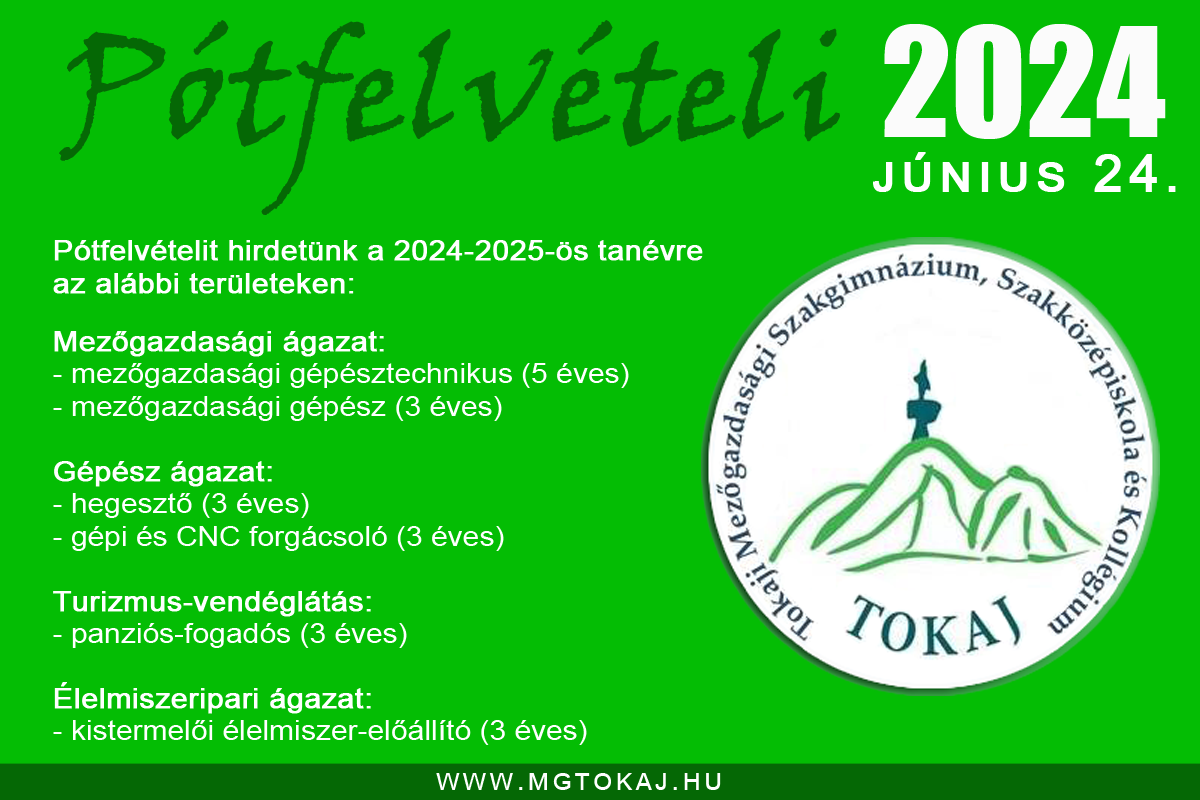
<style>
.page{position:relative;width:1200px;height:800px;background:#04bd04}
.page>*{position:absolute;margin:0}
.t1{font:141.9px "VinerHandITC";color:#056805}
.t2{font:139.5px "Impact";color:#fbfbfb}
.t3{font:52.4px "ArialMT";letter-spacing:0.1em;color:#ffffff;font-variant:small-caps;font-weight:bold}
.t4{font:27px "ArialMT";color:#ffffff;font-weight:bold;scale:1.11 1}
.t5{font:27px "ArialMT";color:#ffffff;scale:1.11 1}
.t6{font:30px "ArialMT";letter-spacing:0.1em;color:#ffffff;font-variant:small-caps}
</style>
<div class="page">
<p class="t1" style="left:59px;top:20px;width:781px;height:195px">Pótfelvételi</p>
<p class="t2" style="left:884px;top:24px;width:282px;height:115px">2024</p>
<p class="t3" style="left:873px;top:152px;width:303px;height:40px">június 24.</p>
<p class="t4" style="left:53px;top:240px;width:650px;height:505px">Pótfelvételit hirdetünk a 2024-2025-ös tanévre <br>az alábbi területeken:<br><br>Mezőgazdasági ágazat:<br><span class="t5">- mezőgazdasági gépésztechnikus (5 éves)<br>- mezőgazdasági gépész (3 éves)<br><br></span>Gépész ágazat:<br><span class="t5">- hegesztő (3 éves)<br>- gépi és CNC forgácsoló (3 éves)<br><br></span>Turizmus-vendéglátás:<br><span class="t5">- panziós-fogadós (3 éves)<br><br></span>Élelmiszeripari ágazat:<br><span class="t5">- kistermelői élelmiszer-előállító (3 éves)</span></p>
<p class="t6" style="left:436px;top:773px;width:285px;height:17px">www.mgtokaj.hu</p>
</div>
